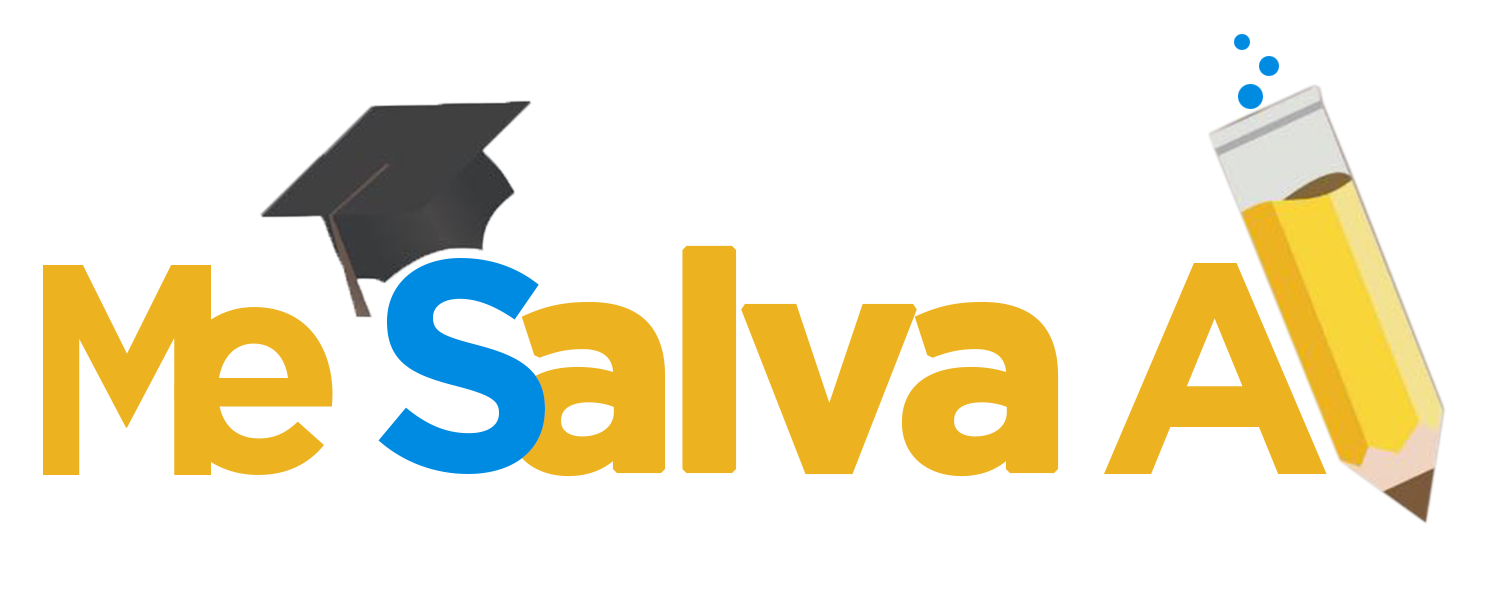
<style>
.page{position:relative;width:1500px;height:609px;background:#ffffff}
.page>*{position:absolute;margin:0}
.t1{font:300px "Gotham-Bold";letter-spacing:-0.08em;color:#ecb220;font-weight:bold}
.t2{font:300px "Gotham-Bold";color:#ecb220;scale:0.8 1}
.t3{font:300px "Gotham-Bold";color:#008be3}
.t4{font:300px "Gotham-Bold";color:#ecb220}
</style>
<div class="page">
<p class="t1" style="left:508px;top:245px;width:551px;height:232px">alva</p>
<p class="t2" style="left:43px;top:265px;width:168px;height:210px">M</p>
<p class="t3" style="left:378px;top:258px;width:167px;height:216px">S</p>
<p class="t4" style="left:1104px;top:263px;width:223px;height:211px">A</p>
<p class="t4" style="left:174px;top:307px;width:159px;height:168px">e</p>
</div>
